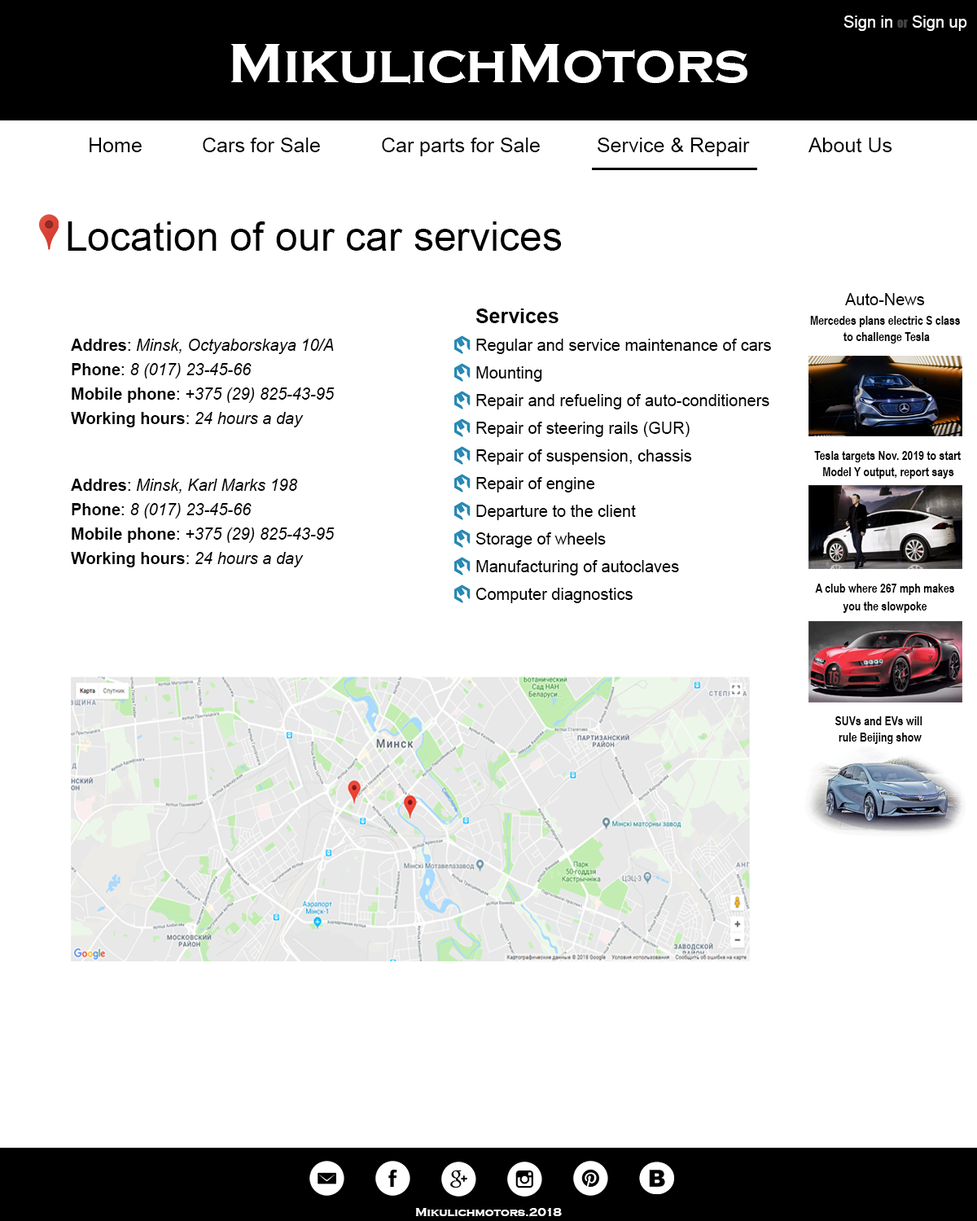
<style>
.page{position:relative;width:977px;height:1221px;background:#ffffff}
.page>*{position:absolute;margin:0}
.t1{font:16.3px "ArialMT";color:#ffffff}
.t2{font:12.2px "Impact";color:#464343}
.t3{font:57px "CopperplateGothic-Bold";color:#ffffff}
.t4{font:20.3px "ArialMT";color:#000000}
.t5{font:40.7px "ArialMT";color:#000000}
.t6{font:16.3px "ArialMT";color:#000000}
.t7{font:16.3px/27.7px "ArialMT";color:#000000}
.t8{font:20.3px/27.7px "Arial-BoldMT";color:#000000}
.t9{font:12.2px/16.3px "ArialNarrow-Bold";color:#000000}
.t10{font:16.3px/24.4px "Arial-ItalicMT";color:#000000}
.t11{font:16.3px/24.4px "Arial-BoldMT";color:#000000}
.t12{font:16.3px/24.4px "ArialMT";color:#000000}
.t13{font:12.2px "ArialNarrow-Bold";color:#000000}
.t14{font:12.2px "CopperplateGothic-Bold";color:#ffffff}
</style>
<div class="page">
<p class="t1" style="left:843px;top:15px;width:49px;height:16px">Sign in</p>
<p class="t1" style="left:912px;top:15px;width:55px;height:16px">Sign up</p>
<p class="t2" style="left:897px;top:20px;width:11px;height:8px">or</p>
<p class="t3" style="left:231px;top:44px;width:516px;height:40px">MikulichMotors</p>
<p class="t4" style="left:90px;top:138px;width:52px;height:14px">Home</p>
<p class="t4" style="left:203px;top:138px;width:117px;height:14px">Cars for Sale</p>
<p class="t4" style="left:382px;top:138px;width:158px;height:18px">Car parts for Sale</p>
<p class="t4" style="left:597px;top:138px;width:153px;height:18px">Service &amp; Repair</p>
<p class="t4" style="left:808px;top:138px;width:84px;height:14px">About Us</p>
<p class="t5" style="left:68px;top:221px;width:494px;height:30px">Location of our car services</p>
<p class="t6" style="left:845px;top:293px;width:80px;height:12px">Auto-News</p>
<p class="t7" style="left:475px;top:308px;width:296px;height:295px"><span class="t8">Services<br></span>Regular and service maintenance of cars<br>Mounting<br>Repair and refueling of auto-conditioners<br>Repair of steering rails (GUR)<br>Repair of suspension, chassis<br>Repair of engine<br>Departure to the client<br>Storage of wheels<br>Manufacturing of autoclaves<br>Computer diagnostics</p>
<p class="t9" style="left:810px;top:316px;width:150px;height:27px;text-align:center">Mercedes plans electric S class <br>to challenge Tesla</p>
<p class="t10" style="left:71px;top:339px;width:264px;height:88px"><span class="t11">Addres</span><span class="t12">: </span>Minsk, Octyaborskaya 10/A<br><span class="t11">Phone</span><span class="t12">: </span>8 (017) 23-45-66<br><span class="t11">Mobile phone</span><span class="t12">: </span>+375 (29) 825-43-95<br><span class="t11">Working hours</span><span class="t12">: </span>24 hours a day</p>
<p class="t13" style="left:814px;top:451px;width:146px;height:11px">Tesla targets Nov. 2019 to start</p>
<p class="t13" style="left:823px;top:467px;width:131px;height:12px">Model Y output, report says</p>
<p class="t10" style="left:71px;top:479px;width:264px;height:88px"><span class="t11">Addres</span><span class="t12">: </span>Minsk, Karl Marks 198<br><span class="t11">Phone</span><span class="t12">: </span>8 (017) 23-45-66<br><span class="t11">Mobile phone</span><span class="t12">: </span>+375 (29) 825-43-95<br><span class="t11">Working hours</span><span class="t12">: </span>24 hours a day</p>
<p class="t13" style="left:815px;top:584px;width:139px;height:11px">A club where 267 mph makes</p>
<p class="t13" style="left:842px;top:601px;width:85px;height:12px">you the slowpoke</p>
<p class="t9" style="left:835px;top:716px;width:87px;height:28px;text-align:center">SUVs and EVs will <br>rule Beijing show</p>
<p class="t14" style="left:415px;top:1208px;width:147px;height:9px">Mikulichmotors.2018</p>
</div>
